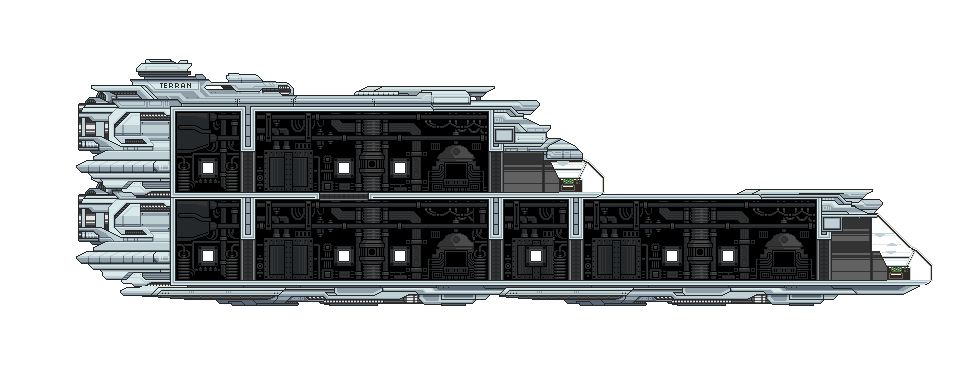
<style>
.page{position:relative;width:960px;height:368px;background:#ffffff}
.page>*{position:absolute;margin:0}
.t1{font:8px "04b03";color:#25282a;text-transform:uppercase;scale:1.1 1}
</style>
<div class="page">
<p class="t1" style="left:160px;top:83px;width:31px;height:5px">TERRAN</p>
</div>
